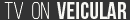
<style>
.page{position:relative;width:130px;height:20px;background:#333333}
.page>*{position:absolute;margin:0}
.t1{font:24px "BebasNeueBold";color:#f8f8f4}
.t2{font:24px "BebasNeueLight";color:#f8f8f4}
</style>
<div class="page">
<p class="t1" style="left:4px;top:2px;width:123px;height:17px"><span class="t2">TV  ON  </span>VEICULAR</p>
</div>
